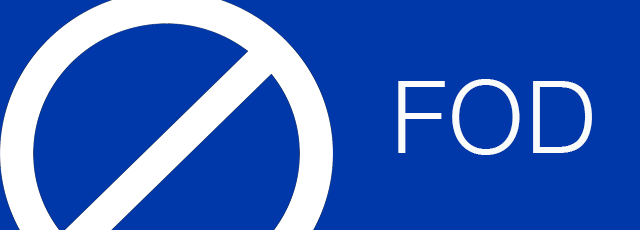
<style>
.page{position:relative;width:640px;height:230px;background:#0038a9}
.page>*{position:absolute;margin:0}
.t1{font:100px "Helvetica-Light";color:#f9fcfb}
</style>
<div class="page">
<p class="t1" style="left:398px;top:79px;width:194px;height:76px">FOD</p>
</div>
